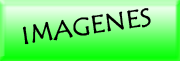
<style>
.page{position:relative;width:180px;height:61px}
.page>*{position:absolute;margin:0}
.t1{font:25px "TempusSansITC";color:#000000;font-weight:bold}
</style>
<div class="page">
<p class="t1" style="left:22px;top:8px;width:129px;height:37px;rotate:-8deg">IMAGENES</p>
</div>
